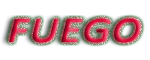
<style>
.page{position:relative;width:150px;height:60px;background:#ffffff}
.page>*{position:absolute;margin:0}
.t1{font:36px "Calibri-Italic";font-weight:bold;scale:1.25 1}
</style>
<div class="page">
<p class="t1" style="left:9px;top:18px;width:132px;height:25px">FUEGO</p>
</div>
